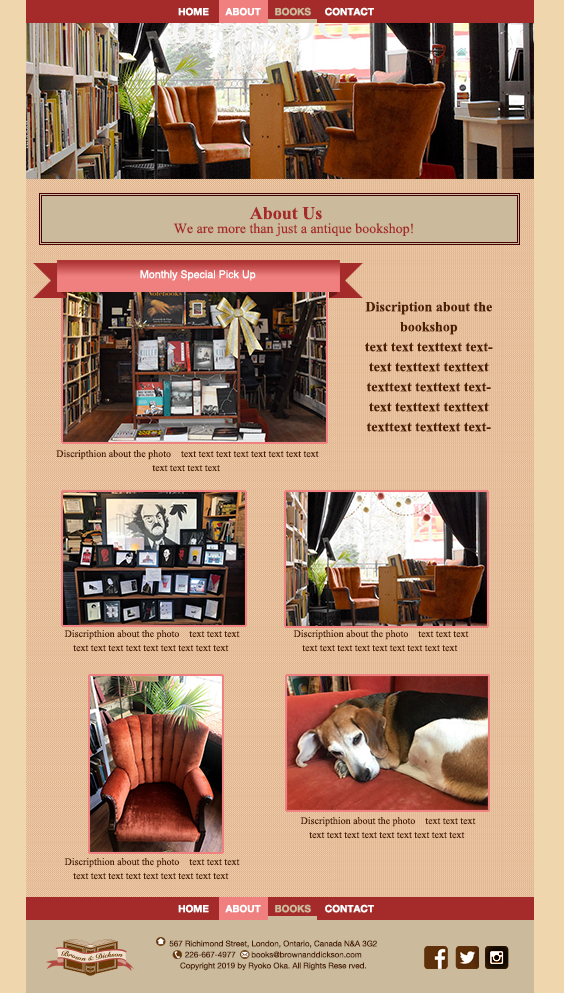
<style>
.page{position:relative;width:564px;height:993px}
.page>*{position:absolute;margin:0}
.t1{font:10px "HelveticaNeue-Bold";color:#ffffff}
.t2{font:10px "HelveticaNeue-Bold";color:#cbba9c}
.t3{font:18px "TimesNewRomanPS-BoldMT";color:#a52a2a}
.t4{font:14px "TimesNewRomanPSMT";color:#a52a2a}
.t5{font:10.7px "Helvetica";color:#ffffff}
.t6{font:14px/20px "TimesNewRomanPS-BoldMT";color:#4d1f03}
.t7{font:10px/14px "TimesNewRomanPSMT";color:#4d1f03}
.t8{font:8px/11px "HelveticaNeue";color:#4d1f03}
</style>
<div class="page">
<p class="t1" style="left:178px;top:7px;width:196px;height:9px">HOME      ABOUT     <span class="t2">BOOKS     </span>CONTACT</p>
<p class="t3" style="left:249px;top:206px;width:73px;height:14px">About Us</p>
<p class="t4" style="left:173px;top:223px;width:240px;height:14px">We are more than just a antique bookshop!</p>
<p class="t5" style="left:140px;top:270px;width:116px;height:11px">Monthly Special Pick Up</p>
<p class="t6" style="left:365px;top:301px;width:128px;height:131px;text-align:center">Discription about the bookshop    <br>text text texttext texttext texttext texttext <br>texttext texttext texttext texttext texttext texttext texttext texttext texttext</p>
<p class="t7" style="left:56px;top:450px;width:263px;height:22px;text-align:center">Discripthion about the photo    text text text text text text text text text text text text</p>
<p class="t7" style="left:64px;top:630px;width:176px;height:22px;text-align:center">Discripthion about the photo    text text text text text text text text text text text text</p>
<p class="t7" style="left:293px;top:630px;width:176px;height:22px;text-align:center">Discripthion about the photo    text text text text text text text text text text text text</p>
<p class="t7" style="left:300px;top:817px;width:176px;height:22px;text-align:center">Discripthion about the photo    text text text text text text text text text text text text</p>
<p class="t7" style="left:64px;top:858px;width:176px;height:22px;text-align:center">Discripthion about the photo    text text text text text text text text text text text text</p>
<p class="t1" style="left:178px;top:904px;width:196px;height:9px">HOME      ABOUT     <span class="t2">BOOKS     </span>CONTACT</p>
<p class="t8" style="left:169px;top:940px;width:208px;height:31px;text-align:center">567 Richimond Street, London, Ontario, Canada N&amp;A 3G2<br>226-667-4977       books@brownanddickson.com<br>Copyright 2019 by Ryoko Oka. All Rights Rese rved.</p>
</div>
